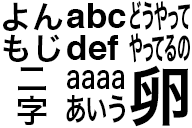
<style>
.page{position:relative;width:192px;height:128px;background:#ffffff}
.page>*{position:absolute;margin:0}
.t1{font:32px/32px "HiraKakuPro-W6";color:#000000}
.t2{font:35px/32px "Helvetica-Bold";color:#000000}
.t3{font:32px/32px "HiraKakuPro-W6";letter-spacing:-0.14em;color:#000000;scale:0.44 1}
.t4{font:64px "HiraKakuPro-W6";color:#000000}
.t5{font:32px/32px "HiraKakuPro-W6";color:#000000;scale:0.74 1}
.t6{font:32px/32px "HiraKakuPro-W6";letter-spacing:-0.08em;color:#000000;scale:0.7 1}
</style>
<div class="page">
<p class="t1" style="left:3px;top:2px;width:60px;height:60px">よん<br>もじ</p>
<p class="t2" style="left:67px;top:3px;width:59px;height:57px">abc<br>def</p>
<p class="t3" style="left:129px;top:1px;width:61px;height:62px">どうやって<br>やってるの</p>
<p class="t4" style="left:130px;top:65px;width:58px;height:62px">卵</p>
<p class="t1" style="left:17px;top:67px;width:30px;height:58px">二<br>字</p>
<p class="t5" style="left:66px;top:70px;width:59px;height:53px">aaaa<br><span class="t6">あいう</span></p>
</div>
